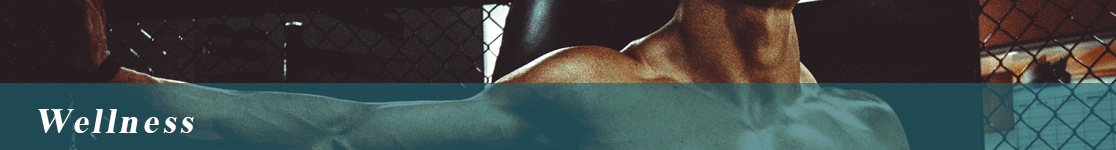
<style>
.page{position:relative;width:1116px;height:150px}
.page>*{position:absolute;margin:0}
.t1{font:36px "TimesNewRomanPS-BoldMT";letter-spacing:0.1em;color:#ffffff;font-style:italic}
</style>
<div class="page">
<p class="t1" style="left:38px;top:109px;width:156px;height:24px">Wellness</p>
</div>
